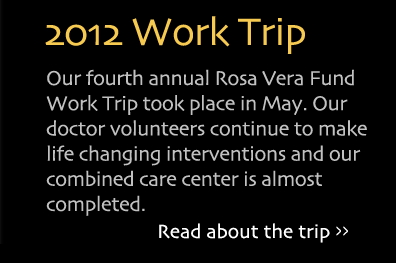
<style>
.page{position:relative;width:396px;height:263px;background:#000000}
.page>*{position:absolute;margin:0}
.t1{font:40px "Skia-Regular";letter-spacing:-0.02em;color:#f6ca50}
.t2{font:21px "Skia-Regular";letter-spacing:-0.02em;color:#c1c1c1}
</style>
<div class="page">
<p class="t1" style="left:45px;top:16px;width:260px;height:38px">2012 Work Trip</p>
<p class="t2" style="left:46px;top:69px;width:321px;height:147px">Our fourth annual Rosa Vera Fund<br>Work Trip took place in May. Our <br>doctor volunteers continue to make<br>life changing interventions and our <br>combined care center is almost <br>completed.</p>
</div>
